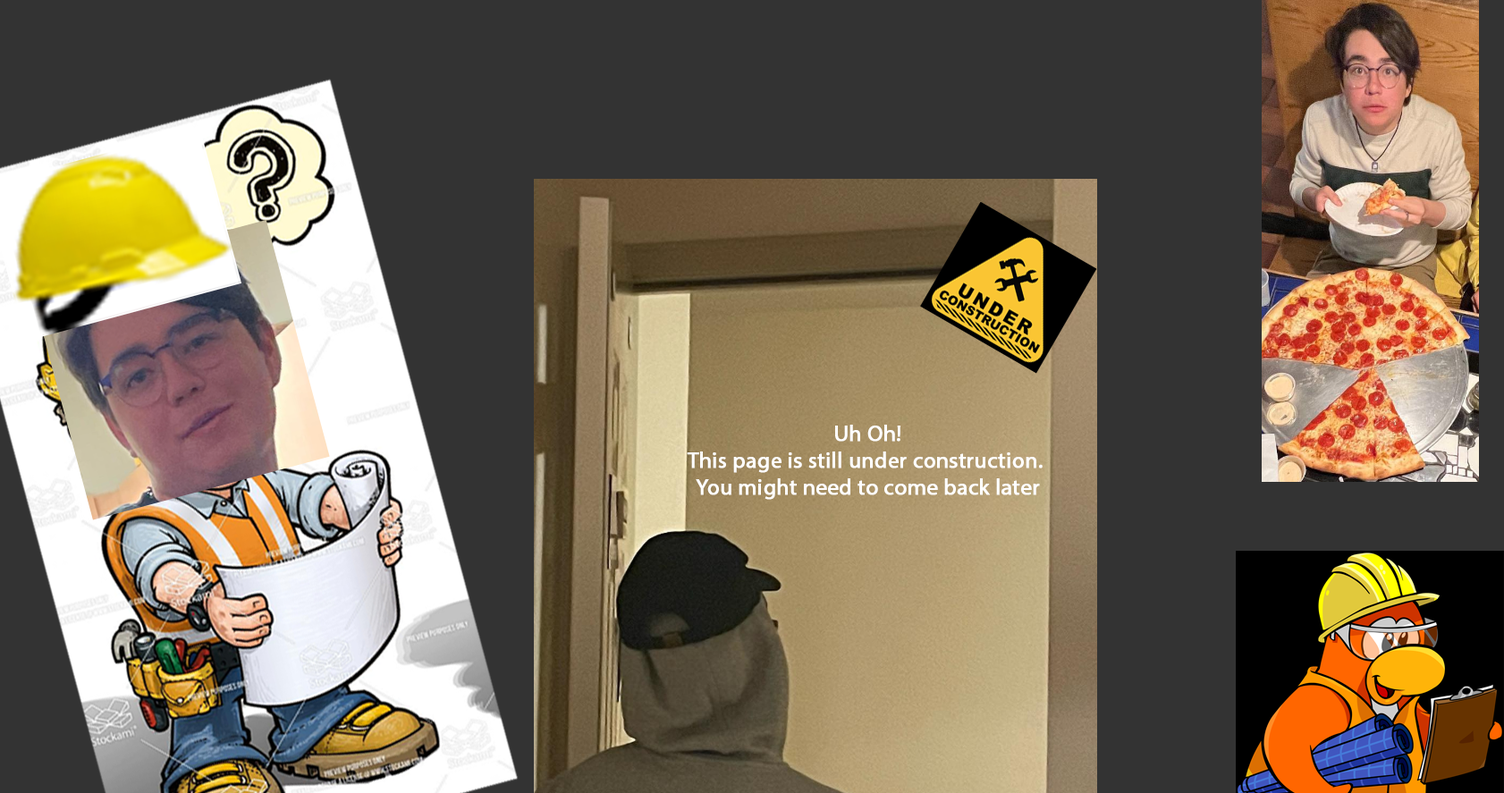
<style>
.page{position:relative;width:1504px;height:793px;background:#333333}
.page>*{position:absolute;margin:0}
.t1{font:22.4px "MyriadPro-Regular";color:#ffffff;font-weight:bold}
</style>
<div class="page">
<p class="t1" style="left:687px;top:425px;width:355px;height:75px;text-align:center">Uh Oh!<br>This page is still under construction. <br>You might need to come back later</p>
</div>
